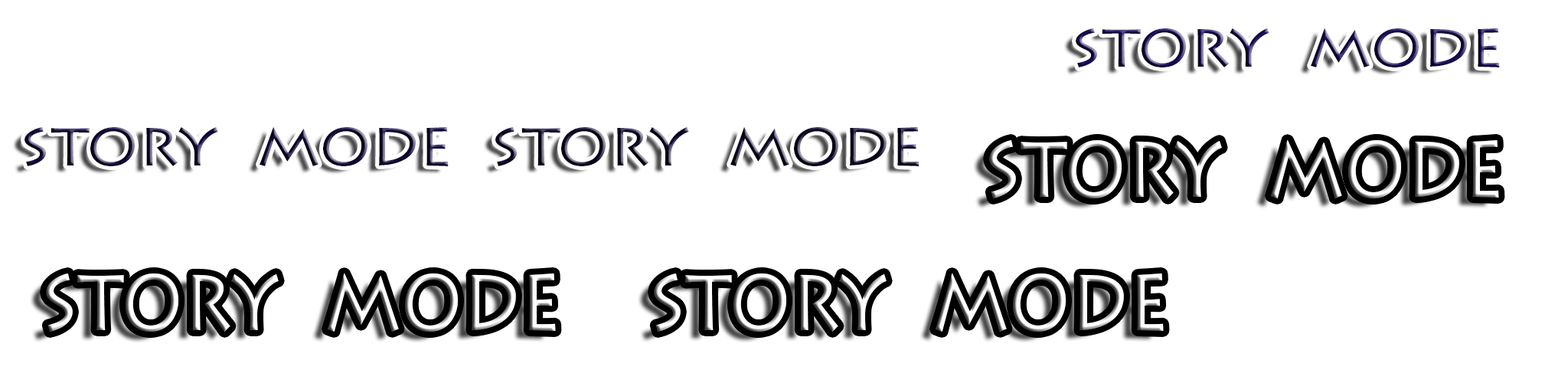
<style>
.page{position:relative;width:1568px;height:383px;background:#ffffff}
.page>*{position:absolute;margin:0}
.t1{font:63.1px "LithosPro-Regular";scale:1.06 1}
.t2{font:92.9px "LithosPro-Regular";scale:0.86 1}
</style>
<div class="page">
<p class="t1" style="left:1076px;top:28px;width:424px;height:39px">story  mode</p>
<p class="t1" style="left:24px;top:127px;width:425px;height:39px">story  mode</p>
<p class="t1" style="left:495px;top:127px;width:425px;height:39px">story  mode</p>
<p class="t2" style="left:989px;top:140px;width:510px;height:58px">story  mode</p>
<p class="t2" style="left:46px;top:273px;width:510px;height:59px">story  mode</p>
<p class="t2" style="left:654px;top:273px;width:510px;height:59px">story  mode</p>
</div>
